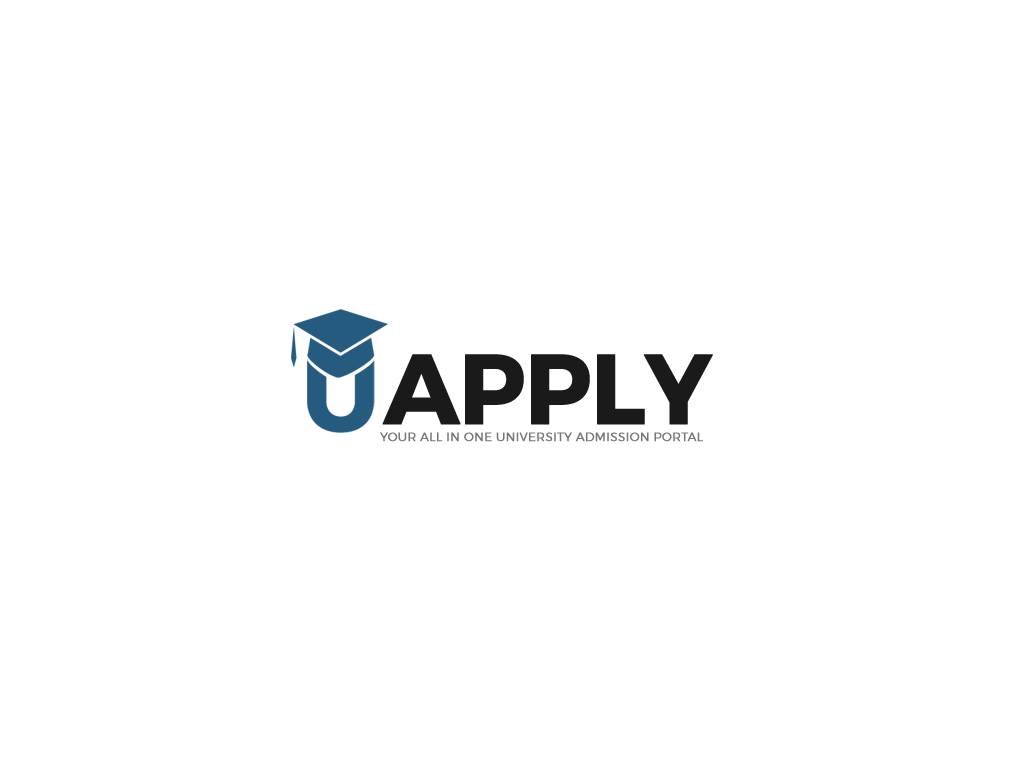
<style>
.page{position:relative;width:1024px;height:768px;background:#ffffff}
.page>*{position:absolute;margin:0}
.t1{font:98.8px "Montserrat-Bold";letter-spacing:-0.04em;color:#1a1a1a;font-weight:bold}
.t2{font:12px "Montserrat-Light";letter-spacing:0.009em;color:#767676;font-weight:bold}
</style>
<div class="page">
<p class="t1" style="left:382px;top:354px;width:331px;height:71px">APPLY</p>
<p class="t2" style="left:380px;top:432px;width:323px;height:10px">YOUR ALL IN ONE UNIVERSITY ADMISSION PORTAL</p>
</div>
